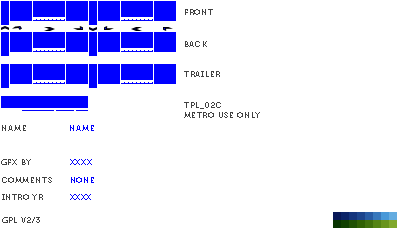
<style>
.page{position:relative;width:400px;height:230px;background:#ffffff}
.page>*{position:absolute;margin:0}
.t1{font:8px "Museo700-Regular";letter-spacing:0.075em;color:#404040;text-transform:uppercase}
.t2{font:8px "Museo700-Regular";letter-spacing:0.075em;color:#0000ff;text-transform:uppercase}
</style>
<div class="page">
<p class="t1" style="left:185px;top:9px;width:28px;height:6px">front</p>
<p class="t1" style="left:185px;top:41px;width:22px;height:6px">back</p>
<p class="t1" style="left:184px;top:71px;width:36px;height:6px">trailer</p>
<p class="t1" style="left:184px;top:102px;width:76px;height:16px">tpl_02c<br>metro use only</p>
<p class="t1" style="left:2px;top:125px;width:24px;height:6px">name</p>
<p class="t2" style="left:70px;top:125px;width:24px;height:6px">name</p>
<p class="t1" style="left:1px;top:159px;width:30px;height:6px">gfx by</p>
<p class="t2" style="left:70px;top:159px;width:22px;height:6px">xxxx</p>
<p class="t1" style="left:2px;top:177px;width:50px;height:6px">comments</p>
<p class="t2" style="left:71px;top:177px;width:23px;height:6px">none</p>
<p class="t1" style="left:2px;top:194px;width:41px;height:6px">intro yr</p>
<p class="t2" style="left:70px;top:194px;width:21px;height:6px">xxxx</p>
<p class="t1" style="left:2px;top:217px;width:38px;height:6px">gpl v2/3</p>
</div>
